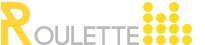
<style>
.page{position:relative;width:205px;height:45px;background:#ffffff}
.page>*{position:absolute;margin:0}
.t1{font:62px "BaronNeue";color:#ffd53c}
.t2{font:27px "Code-Bold";color:#bababa}
</style>
<div class="page">
<p class="t1" style="left:1px;top:1px;width:32px;height:44px">R</p>
<p class="t2" style="left:34px;top:26px;width:105px;height:20px">OULETTE</p>
</div>
